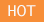
<style>
.page{position:relative;width:44px;height:22px;background:#f78e38}
.page>*{position:absolute;margin:0}
.t1{font:15px "LucidaSans-Typewriter";color:#f8fcf8;scale:1.05 1}
</style>
<div class="page">
<p class="t1" style="left:8px;top:5px;width:28px;height:12px">HOT</p>
</div>
